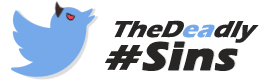
<style>
.page{position:relative;width:277px;height:84px;background:#ffffff}
.page>*{position:absolute;margin:0}
.t1{font:24.6px "ErasITC-Bold";color:#282525;font-style:italic;scale:1.07 1}
.t2{font:24.6px "ErasITC-Bold";color:#76a9ea;font-style:italic;scale:1.07 1}
.t3{font:40.6px "ErasITC-Bold";color:#282525;font-weight:bold;font-style:italic;scale:1.1 1}
.t4{font:36.9px "ErasITC-Bold";color:#282525;font-style:italic;scale:1.52 1}
</style>
<div class="page">
<p class="t1" style="left:114px;top:20px;width:145px;height:23px">TheD<span class="t2">ea</span>dly</p>
<p class="t3" style="left:142px;top:41px;width:96px;height:30px">Sins</p>
<p class="t3" style="left:142px;top:41px;width:96px;height:30px">Sins</p>
<p class="t3" style="left:143px;top:41px;width:96px;height:30px">Sins</p>
<p class="t4" style="left:105px;top:45px;width:38px;height:25px">#</p>
</div>
